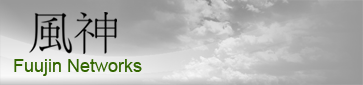
<style>
.page{position:relative;width:363px;height:85px}
.page>*{position:absolute;margin:0}
.t1{font:18px "ArialMT";color:#336600}
</style>
<div class="page">
<p class="t1" style="left:14px;top:59px;width:128px;height:17px">Fuujin Networks</p>
</div>
